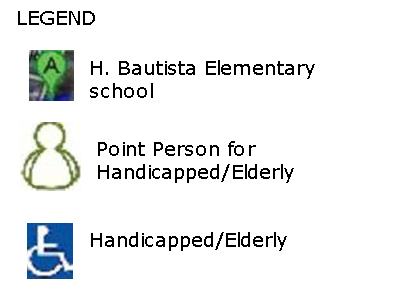
<style>
.page{position:relative;width:400px;height:300px;background:#ffffff}
.page>*{position:absolute;margin:0}
.t1{font:18.9px "Verdana";color:#000000;scale:1.04 1}
</style>
<div class="page">
<p class="t1" style="left:18px;top:11px;width:77px;height:14px">LEGEND</p>
<p class="t1" style="left:90px;top:60px;width:225px;height:38px">H. Bautista Elementary school</p>
<p class="t1" style="left:98px;top:141px;width:196px;height:42px">Point Person for Handicapped/Elderly</p>
<p class="t1" style="left:91px;top:232px;width:196px;height:19px">Handicapped/Elderly</p>
</div>
